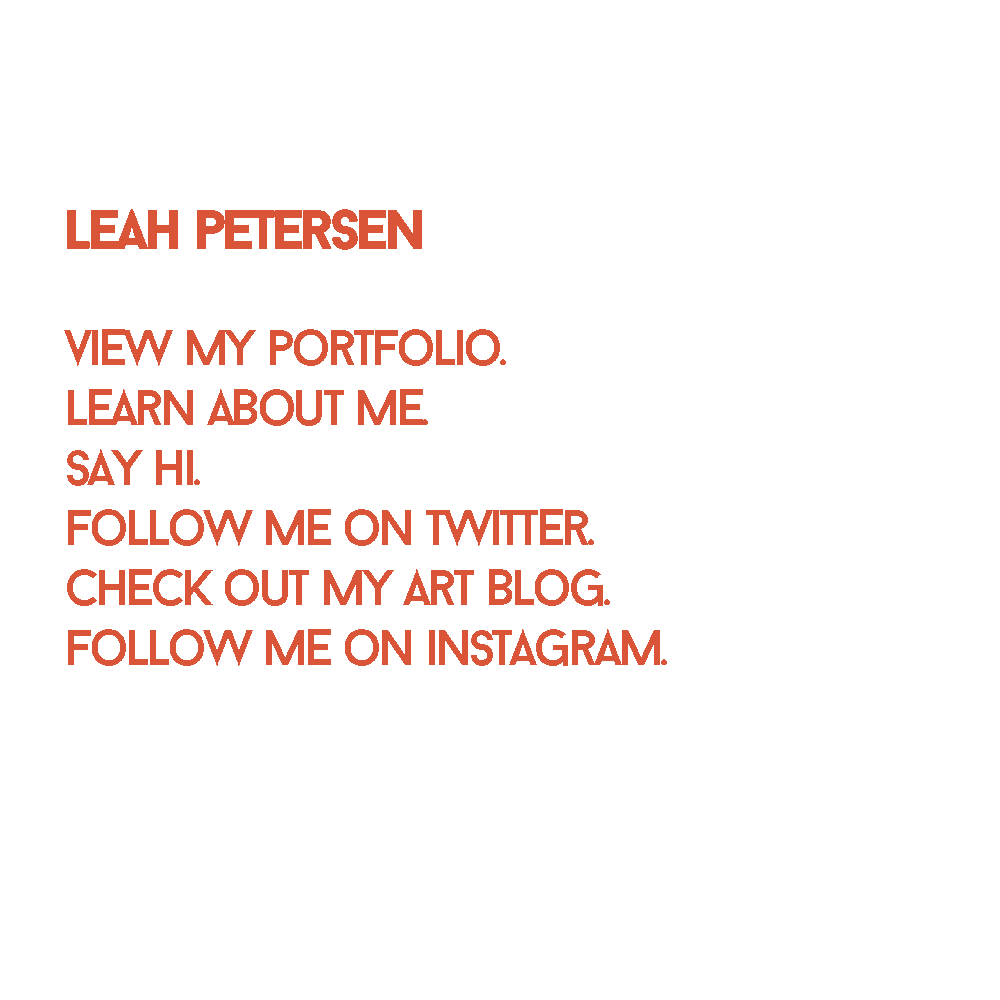
<style>
.page{position:relative;width:1000px;height:1000px;background:#ffffff}
.page>*{position:absolute;margin:0}
.t1{font:50px "BaronNeue";letter-spacing:-0.08em;color:#da5537}
.t2{font:46.7px "BaronNeue";letter-spacing:-0.08em;color:#da5537}
.t3{font:56.7px "BaronNeueBlack";letter-spacing:-0.08em;color:#da5537}
</style>
<div class="page">
<p class="t1" style="left:64px;top:209px;width:603px;height:457px"><span class="t2"><br></span><span class="t3">leah petersen<br><br></span>view my portfolio.<br>learn about me.<br>say hi.<br>Follow me on twitter.<br>check out my art blog.<br>follow me on instagram.</p>
</div>
